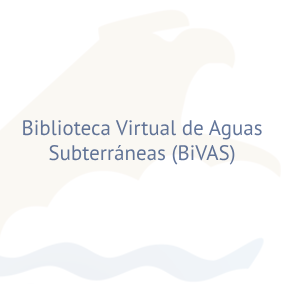
<style>
.page{position:relative;width:284px;height:284px;background:#ffffff}
.page>*{position:absolute;margin:0}
.t1{font:21px "MyriadPro-Regular";color:#617396}
</style>
<div class="page">
<p class="t1" style="left:23px;top:120px;width:239px;height:45px;text-align:center">Biblioteca Virtual de Aguas Subterráneas (BiVAS)</p>
</div>
